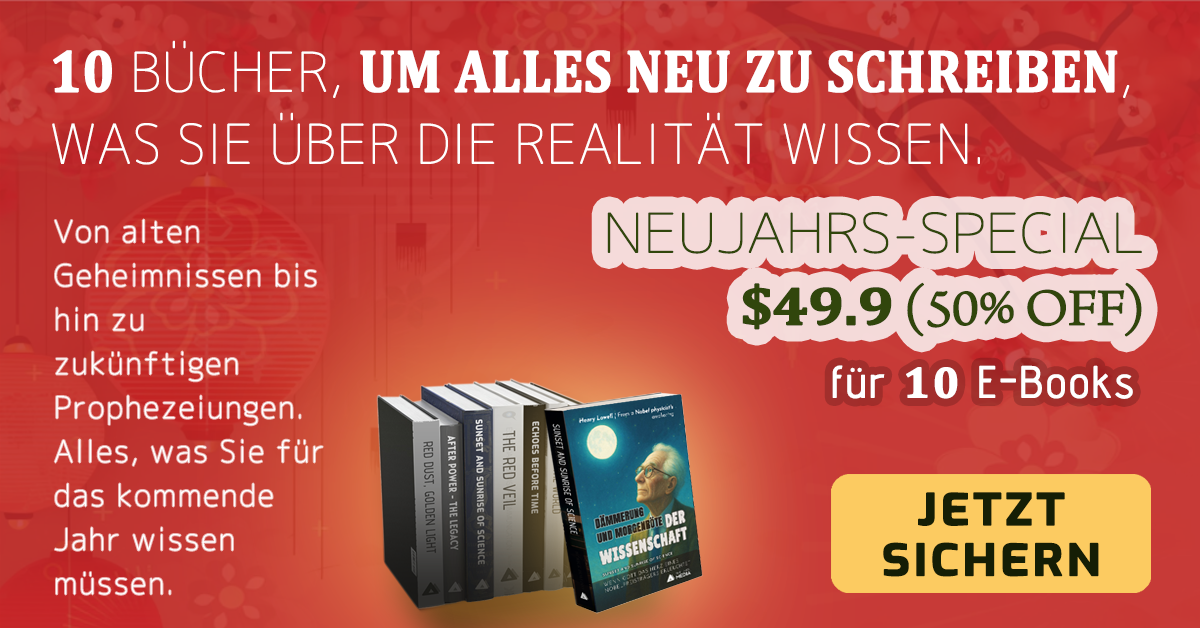
<style>
.page{position:relative;width:1200px;height:628px}
.page>*{position:absolute;margin:0}
.t1{font:54px/72px "Chogokuboso-Gothic";color:#ffffff;font-weight:bold}
.t2{font:60px/72px "Cambria-Bold";color:#ffffff;font-weight:bold;scale:0.88 1}
.t3{font:29.7px/44px "Chogokuboso-Gothic";letter-spacing:0.05em;color:#ffffff;font-weight:bold}
.t4{font:54px/72px "Chogokuboso-Gothic";letter-spacing:-0.025em;color:#31460c;font-weight:bold;scale:1.11 1}
.t5{font:54px/72px "Cambria-Bold";letter-spacing:-0.025em;color:#31460c;font-weight:bold;scale:1.11 1}
.t6{font:54px/72px "ArnoPro-LightDisplay";letter-spacing:-0.025em;color:#31460c;font-weight:bold;scale:1.11 1}
.t7{font:44px "AdventPro-Regular";letter-spacing:0.05em;color:#ffffff;font-weight:bold}
.t8{font:44px "Cambria-Bold";letter-spacing:0.05em;color:#ffffff;font-weight:bold}
.t9{font:43.2px/50.5px "Exo-Bold";letter-spacing:0.05em;color:#151e05;font-weight:bold;scale:1.11 1}
</style>
<div class="page">
<p class="t1" style="left:52px;top:40px;width:1078px;height:125px"><span class="t2">10</span> BÜCHER, <span class="t2">UM ALLES NEU ZU SCHREIBEN</span>, WAS SIE ÜBER DIE REALITÄT WISSEN.</p>
<p class="t3" style="left:54px;top:219px;width:269px;height:376px">Von alten Geheimnissen bis hin zu zukünftigen Prophezeiungen. Alles, was Sie für das kommende Jahr wissen müssen.</p>
<p class="t4" style="left:607px;top:212px;width:535px;height:125px;text-align:right">NEUJAHRS-SPECIAL<br><span class="t5">$49.9</span><span class="t6"> (50% OFF)</span></p>
<p class="t7" style="left:832px;top:365px;width:301px;height:34px">für <span class="t8">10</span> E-Books</p>
<p class="t9" style="left:883px;top:492px;width:216px;height:85px;text-align:center">JETZT <br>SICHERN</p>
</div>
